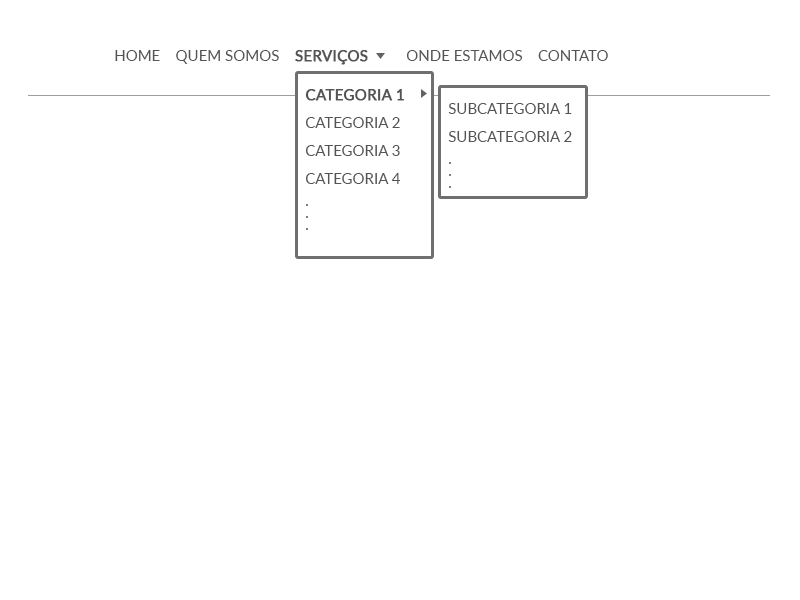
<style>
.page{position:relative;width:800px;height:600px;background:#ffffff}
.page>*{position:absolute;margin:0}
.t1{font:15px "Lato-Regular";color:#545454;text-transform:uppercase}
.t2{font:15px "Lato-Regular";color:#545454;text-transform:uppercase;font-weight:bold}
.t3{font:15px/28px "Lato-Regular";color:#545454;text-transform:uppercase}
.t4{font:15px/28px "Lato-Regular";color:#545454;text-transform:uppercase;font-weight:bold}
.t5{font:15px/22px "Lato-Regular";color:#545454;text-transform:uppercase}
.t6{font:15px/12px "Lato-Regular";color:#545454;text-transform:uppercase}
</style>
<div class="page">
<p class="t1" style="left:115px;top:50px;width:493px;height:15px">Home    quem somos    <span class="t2">serviços         </span>onde estamos    contato</p>
<p class="t3" style="left:305px;top:89px;width:99px;height:141px"><span class="t4">categoria 1<br></span>categoria 2<br>categoria 3<br>categoria 4<br><span class="t5">.<br></span><span class="t6">.<br>.</span></p>
<p class="t3" style="left:448px;top:103px;width:124px;height:85px">subcategoria 1<br>subcategoria 2<br><span class="t5">.<br></span><span class="t6">.<br>.</span></p>
</div>
